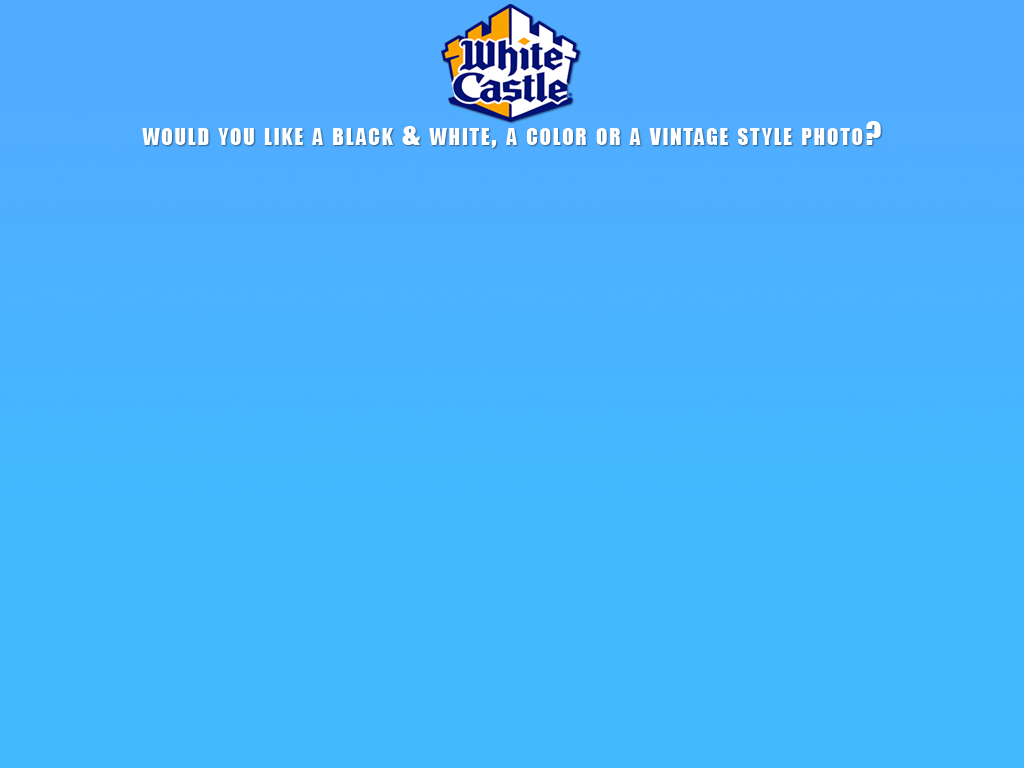
<style>
.page{position:relative;width:1024px;height:768px;background:#42b9ff}
.page>*{position:absolute;margin:0}
.t1{font:30px "Impact";letter-spacing:0.07em;color:#ffffff;font-variant:small-caps}
</style>
<div class="page">
<p class="t1" style="left:142px;top:121px;width:739px;height:27px">would you like a black &amp; white, a color or a vintage style photo?</p>
</div>
